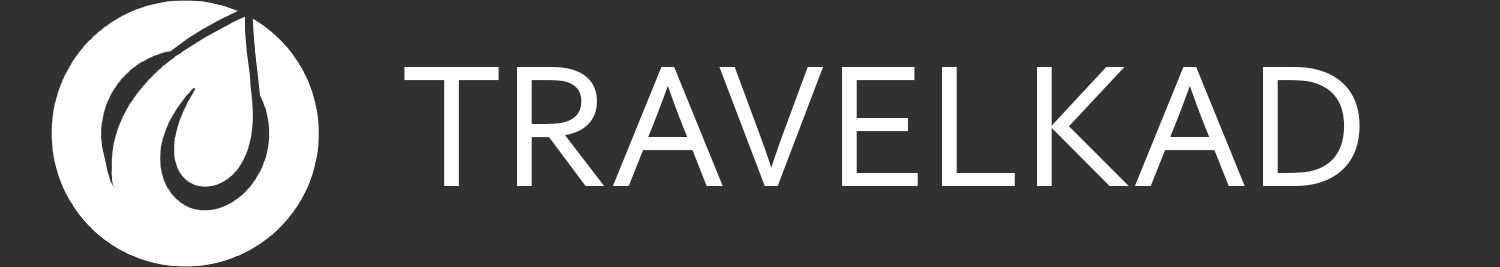
<style>
.page{position:relative;width:1500px;height:267px;background:#313131}
.page>*{position:absolute;margin:0}
.t1{font:182px "Corbel";color:#ffffff}
</style>
<div class="page">
<p class="t1" style="left:404px;top:67px;width:956px;height:119px">TRAVELKAD</p>
</div>
